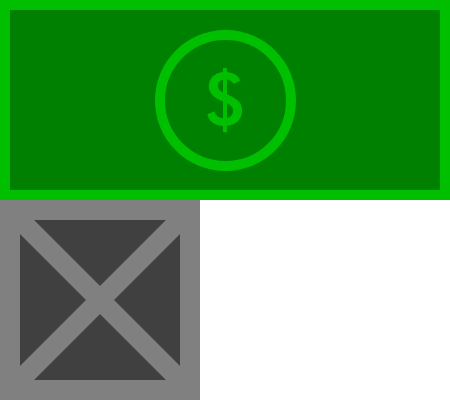
<style>
.page{position:relative;width:450px;height:400px;background:#008000}
.page>*{position:absolute;margin:0}
.t1{font:75px "FuturaBT-Medium";color:#00bf00}
</style>
<div class="page">
<p class="t1" style="left:207px;top:67px;width:36px;height:66px">$</p>
</div>
